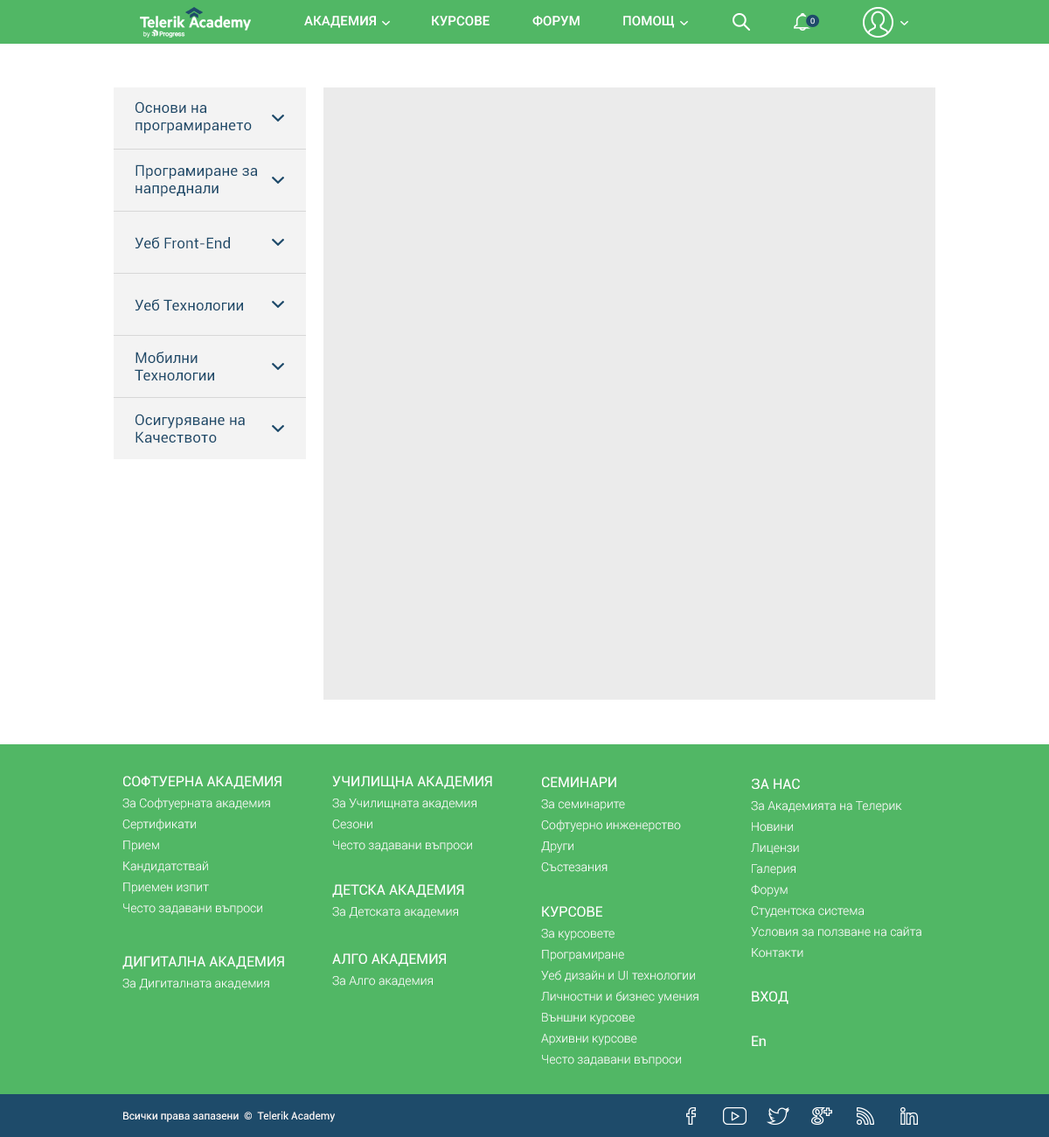
<style>
.page{position:relative;width:1049px;height:1137px;background:#ebebeb}
.page>*{position:absolute;margin:0}
.t1{font:13.1px "Roboto-Medium";letter-spacing:0.005em;color:#ffffff}
.t2{font:14.9px "Roboto-Regular";letter-spacing:0.005em;color:#1e4b6a}
.t3{font:12.2px/21px "Roboto-Light";color:#ffffff}
.t4{font:14px/21px "Roboto-Regular";color:#ffffff;text-transform:uppercase}
.t5{font:14px "Roboto-Regular";color:#ffffff;text-transform:uppercase}
.t6{font:14px "Roboto-Regular";color:#ffffff}
.t7{font:10.5px "Roboto-Regular";color:#ffffff}
</style>
<div class="page">
<p class="t1" style="left:304px;top:16px;width:72px;height:12px">АКАДЕМИЯ</p>
<p class="t1" style="left:432px;top:16px;width:58px;height:10px">КУРСОВЕ</p>
<p class="t1" style="left:532px;top:16px;width:48px;height:10px">ФОРУМ</p>
<p class="t1" style="left:623px;top:16px;width:52px;height:12px">ПОМОЩ</p>
<p class="t2" style="left:136px;top:101px;width:116px;height:33px">Основи на<br>програмирането</p>
<p class="t2" style="left:136px;top:164px;width:122px;height:33px">Програмиране за<br>напреднали</p>
<p class="t2" style="left:135px;top:237px;width:95px;height:11px">Уеб Front-End</p>
<p class="t2" style="left:135px;top:299px;width:108px;height:11px">Уеб Технологии</p>
<p class="t2" style="left:135px;top:351px;width:79px;height:29px">Мобилни<br>Технологии</p>
<p class="t2" style="left:136px;top:414px;width:109px;height:29px">Осигуряване на<br>Качеството</p>
<p class="t3" style="left:122px;top:775px;width:160px;height:140px"><span class="t4">Софтуерна Академия<br></span>За Софтуерната академия<br>Сертификати<br>Прием<br>Кандидатствай<br>Приемен изпит<br>Често задавани въпроси</p>
<p class="t3" style="left:332px;top:775px;width:160px;height:77px"><span class="t4">Училищна Академия<br></span>За Училищната академия<br>Сезони<br>Често задавани въпроси</p>
<p class="t3" style="left:541px;top:776px;width:140px;height:96px"><span class="t4">Семинари<br></span>За семинарите<br>Софтуерно инженерство<br>Други<br>Състезания</p>
<p class="t3" style="left:751px;top:778px;width:170px;height:179px"><span class="t4">За нас<br></span>За Академията на Телерик<br>Новини<br>Лицензи<br>Галерия<br>Форум<br>Студентска система<br>Условия за ползване на сайта<br>Контакти</p>
<p class="t3" style="left:332px;top:884px;width:132px;height:34px"><span class="t4">Детска Академия<br></span>За Детската академия</p>
<p class="t3" style="left:541px;top:906px;width:158px;height:160px"><span class="t4">Kурсове<br></span>За курсовете<br>Програмиране<br>Уеб дизайн и UI технологии<br>Личностни и бизнес умения<br>Външни курсове<br>Архивни курсове<br>Често задавани въпроси</p>
<p class="t3" style="left:332px;top:953px;width:114px;height:34px"><span class="t4">Алго Академия<br></span>За Алго академия</p>
<p class="t3" style="left:122px;top:956px;width:162px;height:34px"><span class="t4">Дигитална Академия<br></span>За Дигиталната академия</p>
<p class="t5" style="left:752px;top:991px;width:37px;height:13px">Вход</p>
<p class="t6" style="left:752px;top:1035px;width:14px;height:11px">En</p>
<p class="t7" style="left:123px;top:1110px;width:212px;height:12px">Всички права запазени  ©  Telerik Academy</p>
</div>
